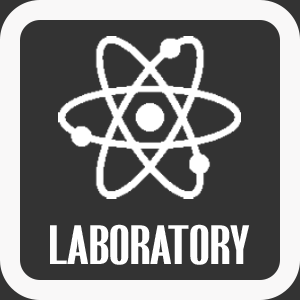
<style>
.page{position:relative;width:300px;height:300px;background:#333333}
.page>*{position:absolute;margin:0}
.t1{font:55px "BluefishDemo-Bold";color:#ffffff}
</style>
<div class="page">
<p class="t1" style="left:50px;top:224px;width:200px;height:41px">LABORATORY</p>
</div>
